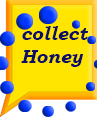
<style>
.page{position:relative;width:97px;height:117px;background:#ffe500}
.page>*{position:absolute;margin:0}
.t1{font:19px "BookmanOldStyle-BoldItalic";color:#0d0f64}
</style>
<div class="page">
<p class="t1" style="left:21px;top:26px;width:68px;height:41px">collect<br>Honey</p>
</div>
